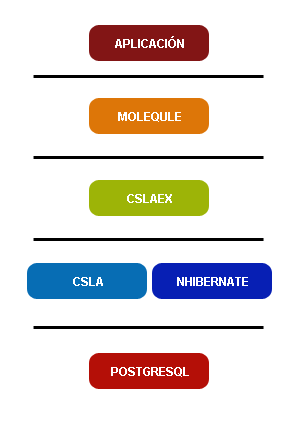
<style>
.page{position:relative;width:301px;height:425px;background:#ffffff}
.page>*{position:absolute;margin:0}
.t1{font:12px "Arial-BoldMT";color:#ffffff}
</style>
<div class="page">
<p class="t1" style="left:115px;top:36px;width:69px;height:12px">APLICACIÓN</p>
<p class="t1" style="left:118px;top:112px;width:63px;height:10px">MOLEQULE</p>
<p class="t1" style="left:127px;top:194px;width:45px;height:9px">CSLAEX</p>
<p class="t1" style="left:73px;top:277px;width:30px;height:9px">CSLA</p>
<p class="t1" style="left:177px;top:277px;width:71px;height:9px">NHIBERNATE</p>
<p class="t1" style="left:111px;top:367px;width:78px;height:10px">POSTGRESQL</p>
</div>
